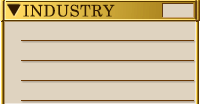
<style>
.page{position:relative;width:200px;height:104px;background:#dfd3c0}
.page>*{position:absolute;margin:0}
.t1{font:16px "CenturySchoolbook";letter-spacing:0.025em;color:#321a02}
</style>
<div class="page">
<p class="t1" style="left:23px;top:4px;width:92px;height:13px">INDUSTRY</p>
</div>
